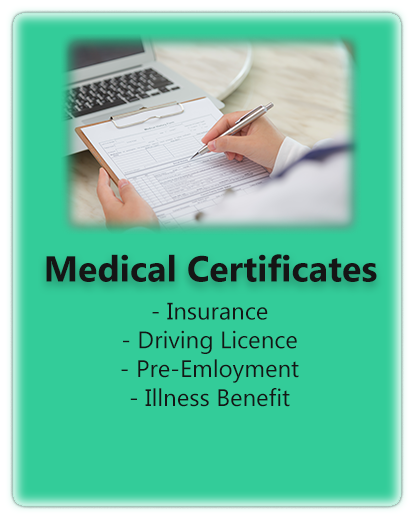
<style>
.page{position:relative;width:420px;height:520px;background:#33cc99}
.page>*{position:absolute;margin:0}
.t1{font:36px "Gadugi-Bold";color:#151515}
.t2{font:24px "Gadugi";color:#151515}
</style>
<div class="page">
<p class="t1" style="left:46px;top:254px;width:331px;height:28px">Medical Certificates</p>
<p class="t2" style="left:121px;top:302px;width:178px;height:105px;text-align:center">- Insurance<br>- Driving Licence<br>- Pre-Emloyment<br>- Illness Benefit</p>
</div>
